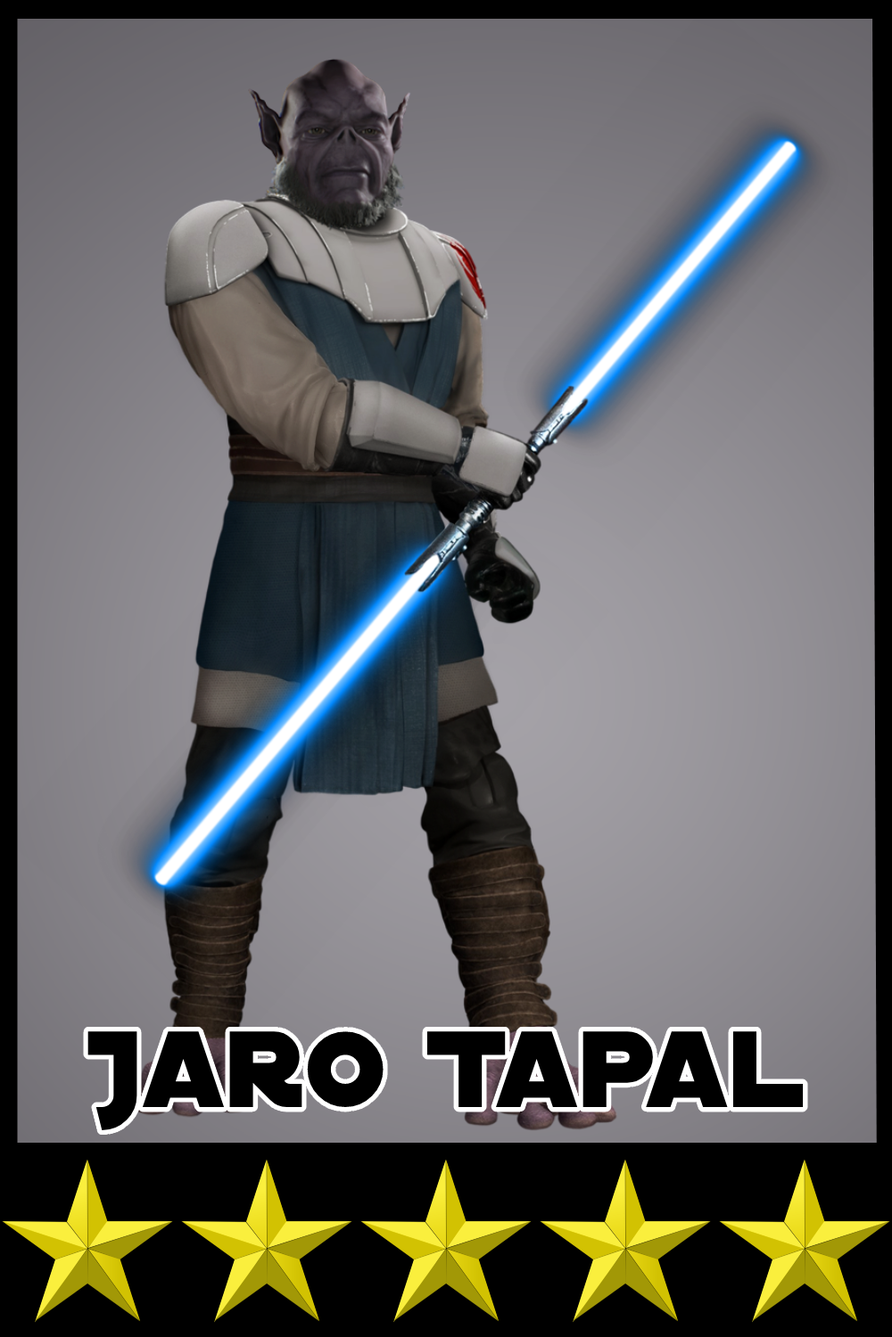
<style>
.page{position:relative;width:892px;height:1337px}
.page>*{position:absolute;margin:0}
.t1{font:116.1px "DistantGalaxy";color:#000000}
</style>
<div class="page">
<p class="t1" style="left:87px;top:1032px;width:716px;height:99px">Jaro Tapal</p>
</div>
